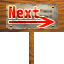
<style>
.page{position:relative;width:64px;height:64px;background:#ffffff}
.page>*{position:absolute;margin:0}
.t1{font:16px "mplus-1m-bold"}
</style>
<div class="page">
<p class="t1" style="left:8px;top:6px;width:31px;height:13px">Next</p>
</div>
